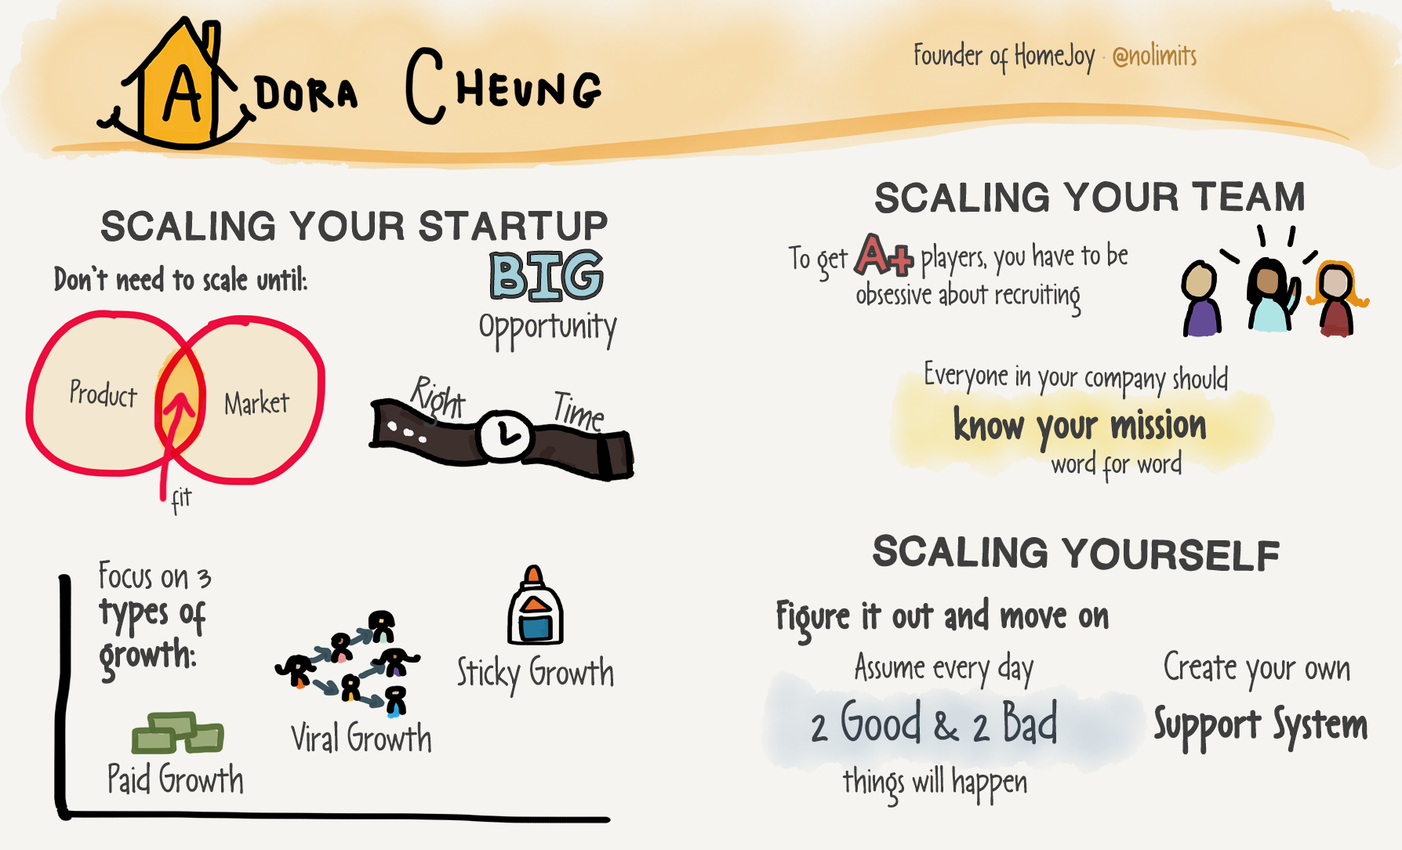
<style>
.page{position:relative;width:1402px;height:850px;background:#f5f4f0}
.page>*{position:absolute;margin:0}
.t1{font:31.2px "LangoPx-Regular";color:#3e3e3e}
.t2{font:31.2px "LangoPx-Regular";color:#b3b3b3}
.t3{font:31.2px "LangoPx-Regular";color:#b38137}
.t4{font:39.2px "EmilysHollowFont";color:#3e3e3e}
.t5{font:47.1px "KBSticktoIt";color:#3e3e3e}
.t6{font:31.4px "LangoPx-Regular";color:#3e3e3e}
.t7{font:54.9px "KBSticktoIt";color:#3e3e3e}
.t8{font:31.4px "LangoPxFat-Regular";color:#3e3e3e}
.t9{font:39.2px "LangoPx-Regular";color:#3e3e3e}
.t10{font:43.1px "LangoPxFat-Regular";color:#3e3e3e}
.t11{font:29px "LangoPx-Regular";color:#3e3e3e}
.t12{font:39.2px/8.6px "LangoPxFat-Regular";color:#3e3e3e}
.t13{font:39.2px/8.6px "LangoPx-Regular";color:#3e3e3e}
.t14{font:39.2px "LangoPxFat-Regular";color:#3e3e3e}
.t15{font:35.3px "LangoPx-Regular";color:#3e3e3e}
.t16{font:54.9px "LangoPx-Regular";color:#3e3e3e}
</style>
<div class="page">
<p class="t1" style="left:915px;top:41px;width:282px;height:35px">Founder of HomeJoy <span class="t2">· </span><span class="t3">@nolimits</span></p>
<p class="t4" style="left:875px;top:181px;width:429px;height:32px">SCALING YOUR TEAM</p>
<p class="t4" style="left:101px;top:210px;width:506px;height:32px">SCALING YOUR STARTUP</p>
<p class="t5" style="left:854px;top:233px;width:60px;height:44px;rotate:-1deg">A+</p>
<p class="t6" style="left:788px;top:241px;width:341px;height:41px;rotate:-1deg">To get           players, you have to be</p>
<p class="t7" style="left:490px;top:249px;width:113px;height:53px">BIG</p>
<p class="t8" style="left:54px;top:264px;width:253px;height:29px">Don’t need to scale until:</p>
<p class="t6" style="left:857px;top:280px;width:225px;height:38px">obsessive about recruiting</p>
<p class="t9" style="left:479px;top:311px;width:138px;height:42px">Opportunity</p>
<p class="t6" style="left:926px;top:360px;width:302px;height:40px;rotate:1deg">Everyone in your company should</p>
<p class="t9" style="left:410px;top:375px;width:57px;height:53px">Right</p>
<p class="t6" style="left:70px;top:379px;width:68px;height:29px;rotate:5deg">Product</p>
<p class="t6" style="left:225px;top:388px;width:65px;height:28px;rotate:-2deg">Market</p>
<p class="t9" style="left:555px;top:391px;width:50px;height:41px">Time</p>
<p class="t10" style="left:954px;top:405px;width:252px;height:48px">know your mission</p>
<p class="t6" style="left:1052px;top:449px;width:130px;height:35px">word for word</p>
<p class="t11" style="left:171px;top:487px;width:21px;height:29px;rotate:-2deg">fit</p>
<p class="t4" style="left:874px;top:535px;width:405px;height:36px;rotate:1deg">SCALING YOURSELF</p>
<p class="t12" style="left:99px;top:560px;width:113px;height:124px"><span class="t13">Focus on 3<br></span><br><br><br>types of<br><br><br><br><br>growth:</p>
<p class="t14" style="left:777px;top:596px;width:332px;height:50px">Figure it out and move on</p>
<p class="t15" style="left:855px;top:651px;width:180px;height:39px">Assume every day</p>
<p class="t9" style="left:1165px;top:650px;width:186px;height:43px">Create your own</p>
<p class="t9" style="left:457px;top:655px;width:157px;height:44px">Sticky Growth</p>
<p class="t16" style="left:812px;top:699px;width:245px;height:46px">2 Good &amp; 2 Bad</p>
<p class="t10" style="left:1155px;top:704px;width:213px;height:51px">Support System</p>
<p class="t9" style="left:291px;top:721px;width:140px;height:33px">Viral Growth</p>
<p class="t9" style="left:108px;top:762px;width:135px;height:33px">Paid Growth</p>
<p class="t15" style="left:842px;top:765px;width:186px;height:43px">things will happen</p>
</div>
